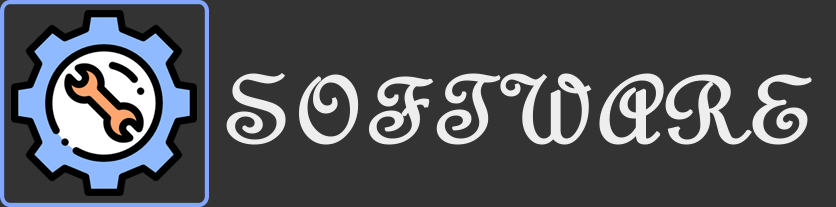
<style>
.page{position:relative;width:836px;height:207px;background:#333333}
.page>*{position:absolute;margin:0}
.t1{font:101.2px "FrenchScriptMT";color:#eeeeee;font-weight:bold;scale:1.16 1}
</style>
<div class="page">
<p class="t1" style="left:226px;top:73px;width:586px;height:72px">SOFTWARE</p>
</div>
